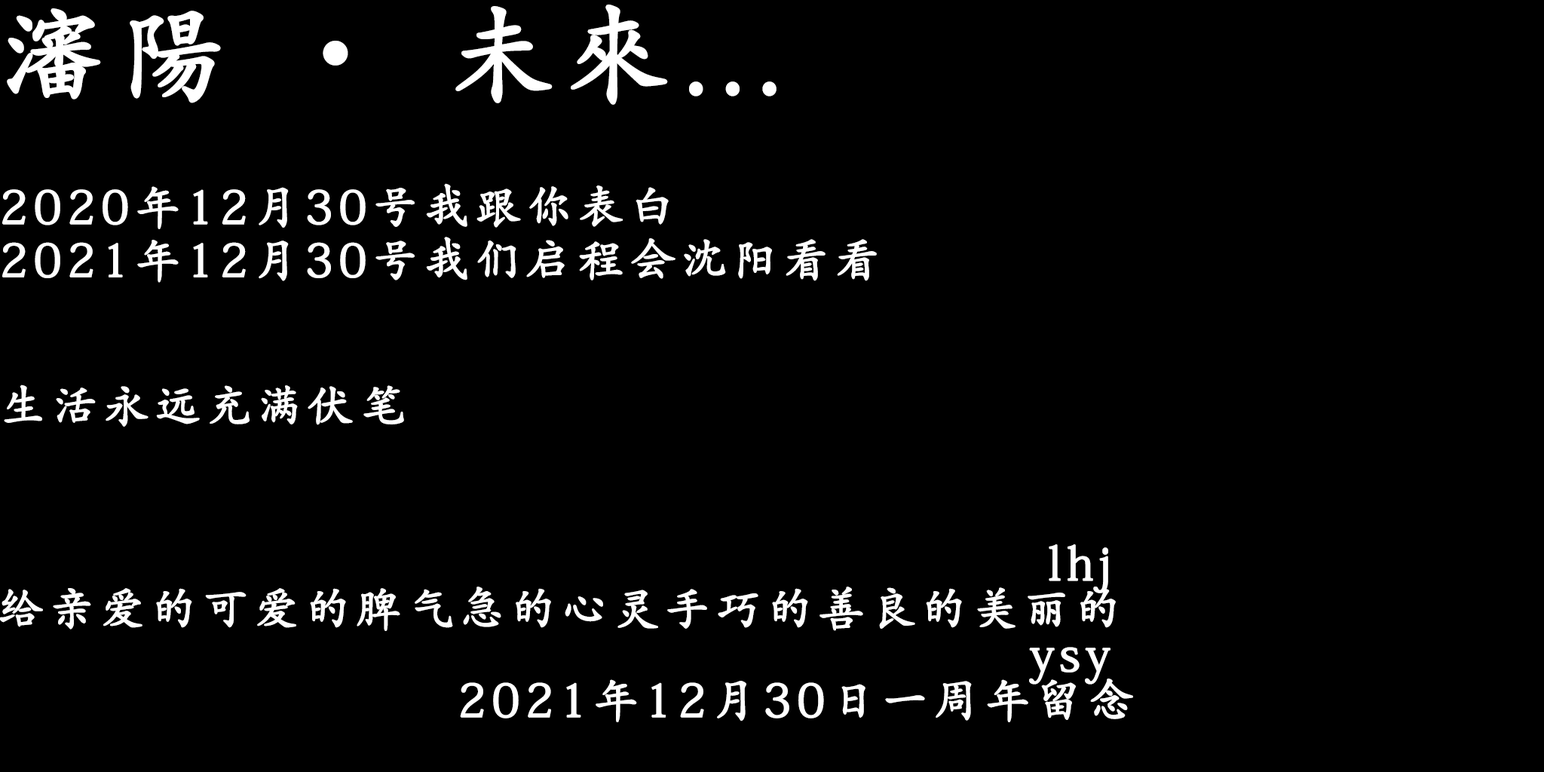
<style>
.page{position:relative;width:1544px;height:772px;background:#000000}
.page>*{position:absolute;margin:0}
.t1{font:106.2px "AdobeKaitiStd-Regular";letter-spacing:0.1em;color:#ffffff;font-weight:bold}
.t2{font:45.6px/7.6px "AdobeKaitiStd-Regular";letter-spacing:0.1em;color:#ffffff;font-weight:bold}
.t3{font:45.6px "AdobeKaitiStd-Regular";letter-spacing:0.1em;color:#ffffff;font-weight:bold}
.t4{font:45.6px/45.6px "AdobeKaitiStd-Regular";letter-spacing:0.1em;color:#ffffff;font-weight:bold}
</style>
<div class="page">
<p class="t1" style="left:7px;top:5px;width:770px;height:100px">瀋陽 · 未來...</p>
<p class="t2" style="left:2px;top:183px;width:875px;height:100px">2020年12月30号我跟你表白<br><br><br><br><br><br><br>2021年12月30号我们启程会沈阳看看</p>
<p class="t3" style="left:4px;top:385px;width:400px;height:42px">生活永远充满伏笔</p>
<p class="t4" style="left:0px;top:544px;width:1133px;height:178px">lhj<br>给亲爱的可爱的脾气急的心灵手巧的善良的美丽的<br>                                                        ysy<br>                         2021年12月30日一周年留念</p>
</div>
